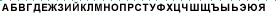
<style>
.page{position:relative;width:280px;height:13px;background:#ffffff}
.page>*{position:absolute;margin:0}
.t1{font:10px "Arial-BoldMT";letter-spacing:0.075em;color:#000000}
.t2{font:10px "Arial-BoldMT";letter-spacing:0.1em;color:#000000}
.t3{font:10px "Arial-BoldMT";letter-spacing:0.08em;color:#000000}
.t4{font:10px "Arial-BoldMT";letter-spacing:0.07em;color:#000000}
.t5{font:10px "Arial-BoldMT";letter-spacing:0.175em;color:#000000}
.t6{font:10px "Arial-BoldMT";letter-spacing:0.045em;color:#000000}
.t7{font:10px "Arial-BoldMT";letter-spacing:0.03em;color:#000000}
.t8{font:10px "Arial-BoldMT";letter-spacing:0.025em;color:#000000}
.t9{font:10px "Arial-BoldMT";letter-spacing:0.06em;color:#000000}
.t10{font:10px "Arial-BoldMT";letter-spacing:0.05em;color:#000000}
.t11{font:10px "Arial-BoldMT";letter-spacing:0.04em;color:#000000}
.t12{font:10px "Arial-BoldMT";letter-spacing:0.085em;color:#000000}
.t13{font:10px "Arial-BoldMT";letter-spacing:0.12em;color:#000000}
.t14{font:10px "Arial-BoldMT";letter-spacing:0.11em;color:#000000}
.t15{font:10px "Arial-BoldMT";letter-spacing:0.09em;color:#000000}
.t16{font:10px "Arial-BoldMT";color:#000000}
</style>
<div class="page">
<p class="t1" style="left:2px;top:1px;width:263px;height:12px"><span class="t2">А</span><span class="t3">Б</span><span class="t4">В</span><span class="t5">Г</span><span class="t6">Д</span><span class="t7">Е</span><span class="t8">Ж</span><span class="t9">З</span>ИЙ<span class="t9">К</span><span class="t10">Л</span><span class="t9">М</span><span class="t6">Н</span><span class="t11">О</span><span class="t12">П</span><span class="t9">Р</span>С<span class="t2">Т</span><span class="t3">У</span><span class="t13">Ф</span><span class="t11">Х</span><span class="t9">Ц</span><span class="t14">Ч</span><span class="t15">Ш</span><span class="t7">Щ</span>Ъ<span class="t13">Ы</span><span class="t2">Ь</span><span class="t9">Э</span><span class="t3">Ю</span><span class="t16">Я</span></p>
</div>
